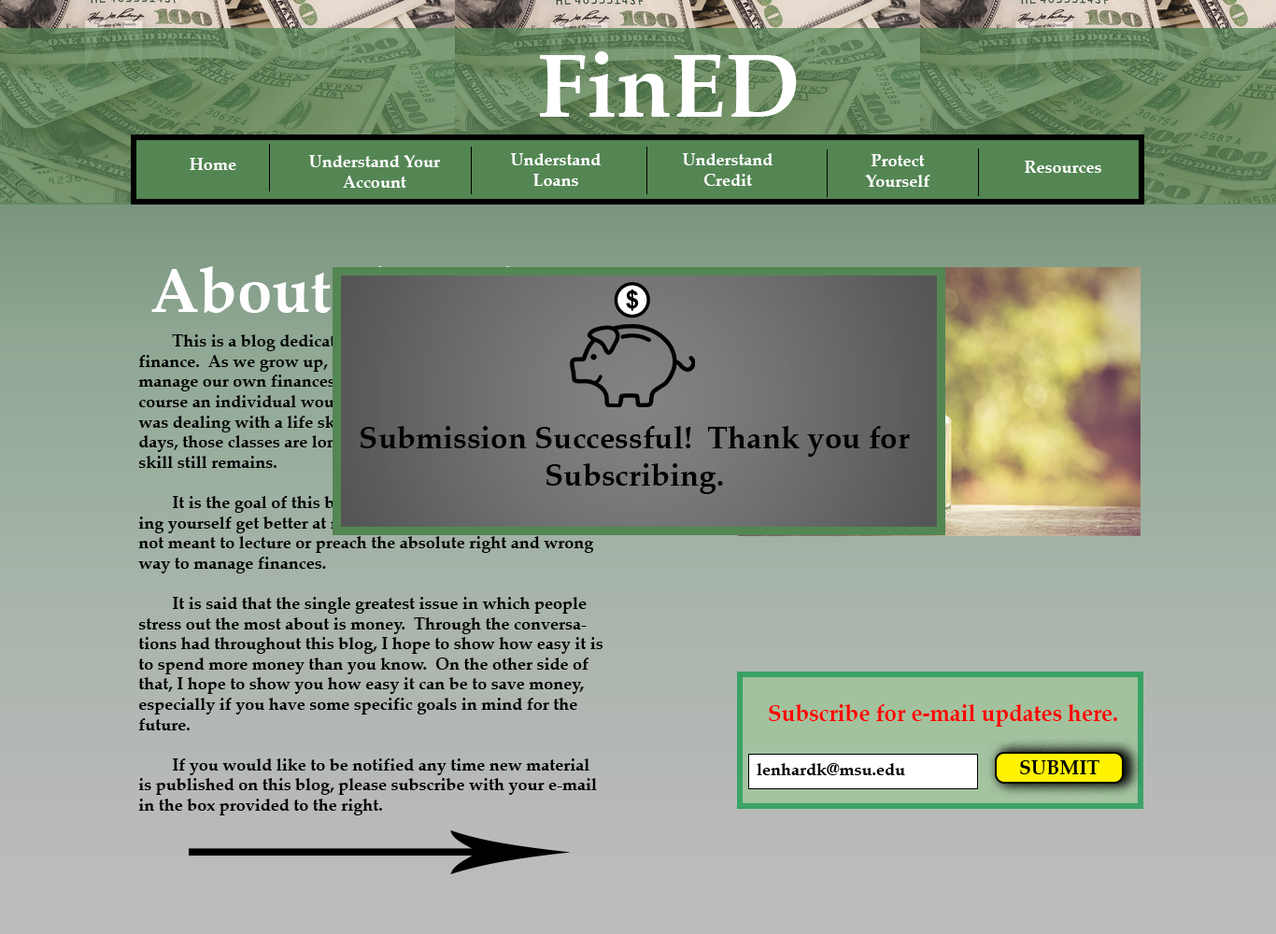
<style>
.page{position:relative;width:1276px;height:934px}
.page>*{position:absolute;margin:0}
.t1{font:89.7px "Palatino-Bold";color:#ffffff}
.t2{font:16.8px "Palatino-Bold";color:#ffffff}
.t3{font:62.6px "Palatino-Bold"}
.t4{font:16.8px "Palatino-Bold";color:#000000}
.t5{font:30.8px "Palatino-Bold";color:#000000}
.t6{font:22.4px "Palatino-Bold";color:#ff0000}
.t7{font:19.6px "Palatino-Bold";color:#000000}
</style>
<div class="page">
<p class="t1" style="left:540px;top:51px;width:257px;height:66px">FinED</p>
<p class="t2" style="left:190px;top:158px;width:46px;height:12px">Home</p>
<p class="t2" style="left:309px;top:155px;width:131px;height:33px;text-align:center">Understand Your <br>Account</p>
<p class="t2" style="left:510px;top:153px;width:91px;height:33px;text-align:center">Understand<br>Loans</p>
<p class="t2" style="left:682px;top:153px;width:91px;height:33px;text-align:center">Understand<br>Credit</p>
<p class="t2" style="left:865px;top:154px;width:66px;height:33px;text-align:center">Protect<br>Yourself</p>
<p class="t2" style="left:1025px;top:161px;width:77px;height:12px">Resources</p>
<p class="t3" style="left:151px;top:266px;width:434px;height:62px">About the Blog</p>
<p class="t4" style="left:138px;top:334px;width:468px;height:482px">This is a blog dedicated to thinking about personal finance.  As we grow up, it gets more and more difficult to manage our own finances.  There use to be a time in which a course an individual would take in school before graduating was dealing with a life skill, like personal finance.  Nowadays, those classes are long gone, but the need to develop the skill still remains.<br><br> It is the goal of this blog to lend ideas and tips for helping yourself get better at managing your own finances.  It is not meant to lecture or preach the absolute right and wrong way to manage finances.<br><br> It is said that the single greatest issue in which people stress out the most about is money.  Through the conversations had throughout this blog, I hope to show how easy it is to spend more money than you know.  On the other side of that, I hope to show you how easy it can be to save money, especially if you have some specific goals in mind for the future.<br><br> If you would like to be notified any time new material is published on this blog, please subscribe with your e-mail in the box provided to the right.</p>
<p class="t5" style="left:360px;top:426px;width:550px;height:68px;text-align:center">Submission Successful!  Thank you for Subscribing.</p>
<p class="t6" style="left:769px;top:704px;width:348px;height:23px">Subscribe for e-mail updates here.</p>
<p class="t7" style="left:1020px;top:761px;width:80px;height:14px">SUBMIT</p>
<p class="t4" style="left:757px;top:763px;width:148px;height:12px">lenhardk@msu.edu</p>
</div>
